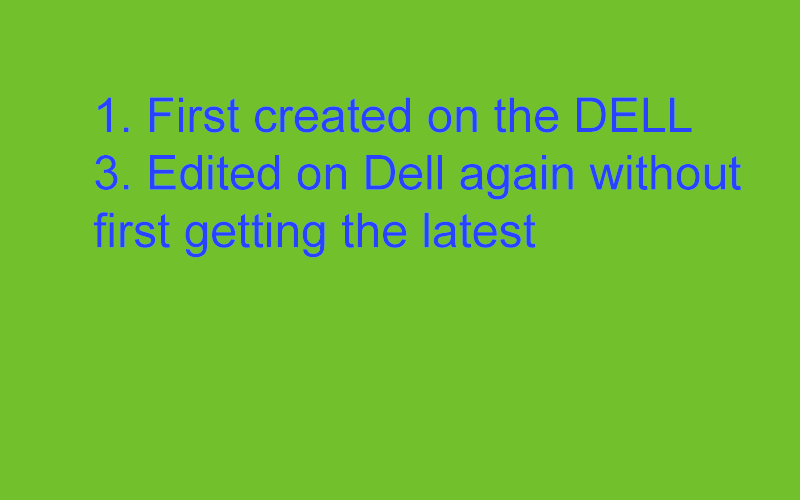
<style>
.page{position:relative;width:800px;height:500px;background:#73c02d}
.page>*{position:absolute;margin:0}
.t1{font:48px "ArialMT";color:#2942ff}
</style>
<div class="page">
<p class="t1" style="left:93px;top:97px;width:648px;height:161px">1. First created on the DELL<br>3. Edited on Dell again without<br>first getting the latest</p>
</div>
